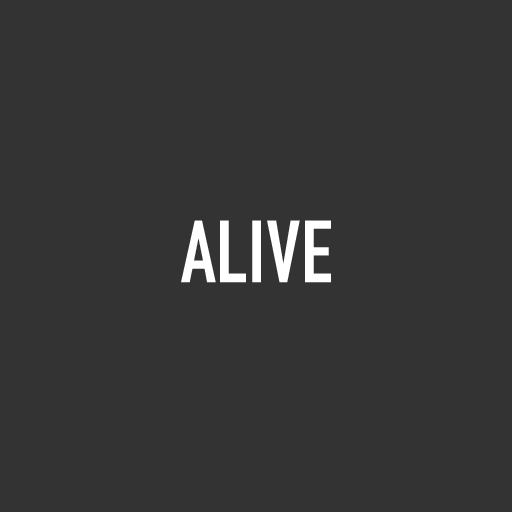
<style>
.page{position:relative;width:512px;height:512px;background:#333333}
.page>*{position:absolute;margin:0}
.t1{font:86px "DINEngschrift";color:#ffffff}
</style>
<div class="page">
<p class="t1" style="left:181px;top:220px;width:150px;height:63px">ALIVE</p>
</div>
